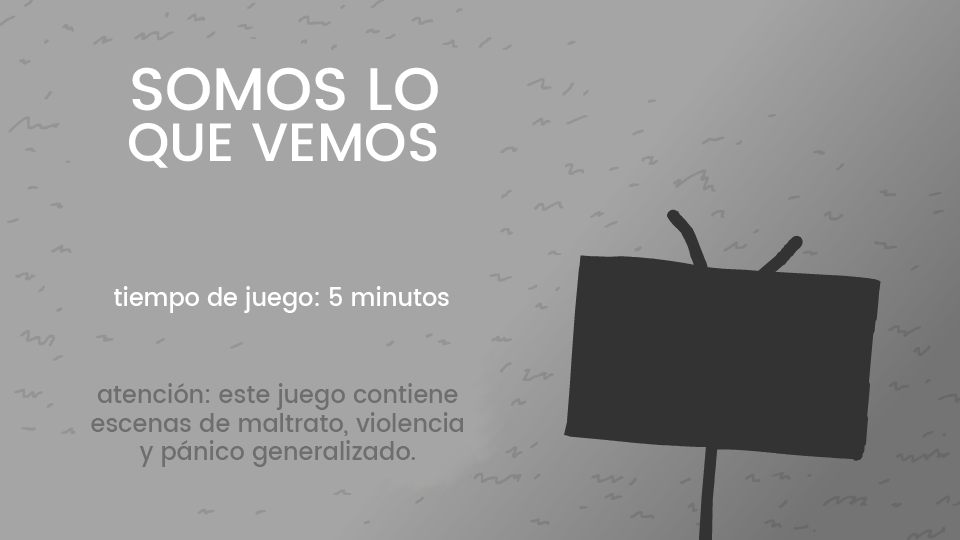
<style>
.page{position:relative;width:960px;height:540px;background:#a5a5a5}
.page>*{position:absolute;margin:0}
.t1{font:60px "Poppins-Medium";color:#ffffff}
.t2{font:54px "Poppins-Medium";color:#ffffff}
.t3{font:24px "Poppins-Medium";color:#ffffff}
.t4{font:24px "Poppins-Medium";color:#6d6d6d}
</style>
<div class="page">
<p class="t1" style="left:132px;top:67px;width:306px;height:44px">SOMOS LO</p>
<p class="t2" style="left:129px;top:123px;width:308px;height:45px">QUE VEMOS</p>
<p class="t3" style="left:114px;top:286px;width:335px;height:27px">tiempo de juego: 5 minutos</p>
<p class="t4" style="left:91px;top:383px;width:372px;height:84px;text-align:center">atención: este juego contiene<br>escenas de maltrato, violencia<br>y pánico generalizado.</p>
</div>
